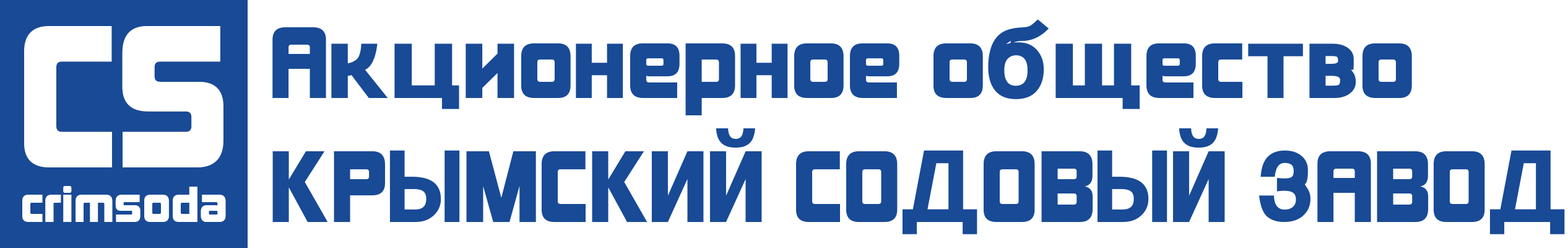
<style>
.page{position:relative;width:1568px;height:248px;background:#ffffff}
.page>*{position:absolute;margin:0}
.t1{font:185.7px "KimberleyCYR-Black";color:#ffffff}
.t2{font:92.9px/123.8px "KimberleyCYR-Black";color:#184a96}
.t3{font:46.4px "KimberleyCYR-Black";color:#ffffff}
</style>
<div class="page">
<p class="t1" style="left:24px;top:26px;width:199px;height:141px">CS</p>
<p class="t2" style="left:272px;top:19px;width:1293px;height:215px">Акционерное общество<br>КРЫМСКИЙ СОДОВЫЙ ЗАВОД</p>
<p class="t3" style="left:22px;top:186px;width:204px;height:36px">crimsoda</p>
</div>
